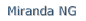
<style>
.page{position:relative;width:86px;height:21px;background:#ffffff}
.page>*{position:absolute;margin:0}
.t1{font:12px "Verdana"}
</style>
<div class="page">
<p class="t1" style="left:8px;top:5px;width:68px;height:11px">Miranda NG</p>
</div>
